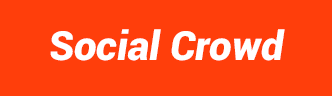
<style>
.page{position:relative;width:332px;height:96px;background:#ff3e0b}
.page>*{position:absolute;margin:0}
.t1{font:40.1px "Roboto-BlackItalic";color:#ffffff}
</style>
<div class="page">
<p class="t1" style="left:50px;top:29px;width:235px;height:32px">Social Crowd</p>
</div>
